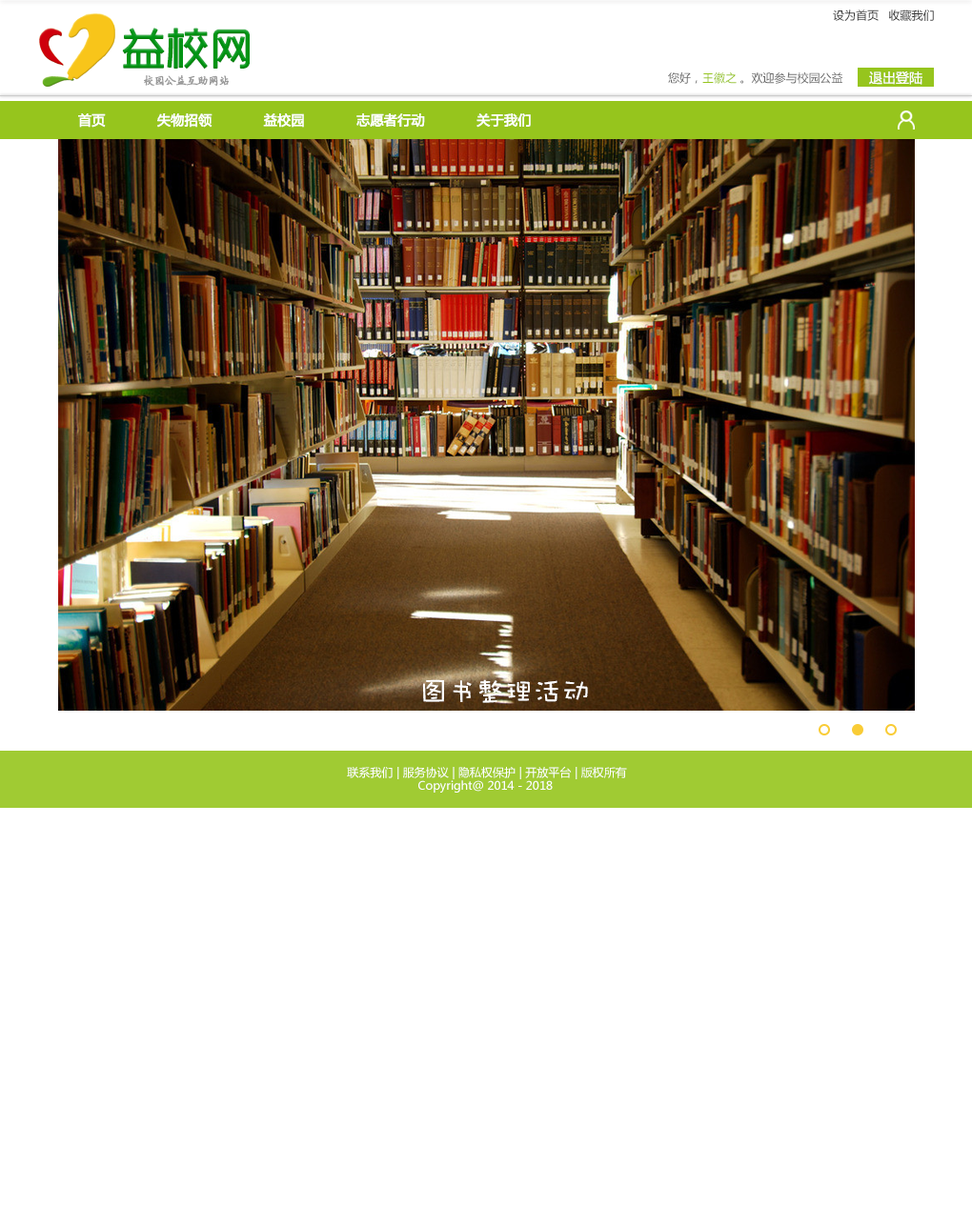
<style>
.page{position:relative;width:972px;height:1227px;background:#ffffff}
.page>*{position:absolute;margin:0}
.t1{font:11.4px "MicrosoftYaHei";color:#333333}
.t2{font:42.9px "RTWSYueGoTrial-Regular";color:#009414;font-weight:bold}
.t3{font:11.4px "FZYBKSJW--GB1-0";letter-spacing:-0.08em;color:#999999;font-weight:bold}
.t4{font:11.4px "MicrosoftYaHei";color:#666666}
.t5{font:11.4px "MicrosoftYaHei";color:#96c51d}
.t6{font:13.3px "MicrosoftYaHei";color:#fdfcfc}
.t7{font:13.3px "MicrosoftYaHei";color:#ffffff;font-weight:bold}
.t8{font:28.6px "DFPWaWaW5";color:#ffffff}
.t9{font:11.4px/13.3px "MicrosoftYaHei";color:#ffffff}
</style>
<div class="page">
<p class="t1" style="left:833px;top:10px;width:101px;height:11px">设为首页   收藏我们</p>
<p class="t2" style="left:122px;top:28px;width:128px;height:42px">益校网</p>
<p class="t3" style="left:144px;top:75px;width:85px;height:11px">校园公益互助网站</p>
<p class="t4" style="left:668px;top:71px;width:174px;height:13px">您好，<span class="t5">王徽之 </span>。欢迎参与校园公益</p>
<p class="t6" style="left:869px;top:71px;width:53px;height:14px">退出登陆</p>
<p class="t7" style="left:78px;top:113px;width:453px;height:15px">首页            失物招领            益校园            志愿者行动            关于我们</p>
<p class="t8" style="left:423px;top:679px;width:165px;height:24px">图书整理活动</p>
<p class="t9" style="left:347px;top:766px;width:280px;height:27px;text-align:center">联系我们 | 服务协议 | 隐私权保护 | 开放平台 | 版权所有<br>Copyright@ 2014 - 2018</p>
</div>
